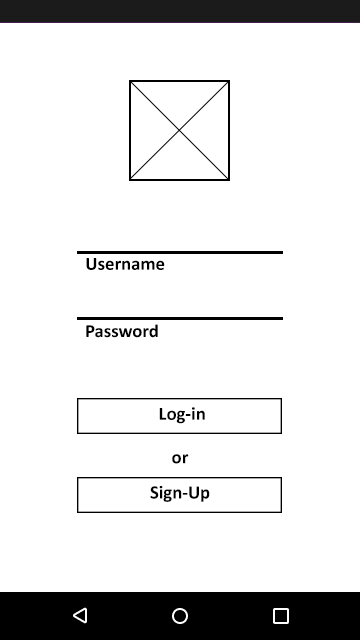
<style>
.page{position:relative;width:360px;height:640px;background:#ffffff}
.page>*{position:absolute;margin:0}
.t1{font:18.7px "Calibri-Bold";color:#000000}
.t2{font:18.5px "Calibri-Bold";color:#000000}
.t3{font:18.8px "Calibri-Bold";color:#000000}
.t4{font:18.9px "Calibri-Bold";color:#000000}
</style>
<div class="page">
<p class="t1" style="left:86px;top:258px;width:79px;height:12px">Username</p>
<p class="t2" style="left:86px;top:324px;width:72px;height:14px">Password</p>
<p class="t1" style="left:159px;top:407px;width:46px;height:17px">Log-in</p>
<p class="t3" style="left:172px;top:454px;width:17px;height:10px">or</p>
<p class="t4" style="left:150px;top:486px;width:60px;height:16px">Sign-Up</p>
</div>
